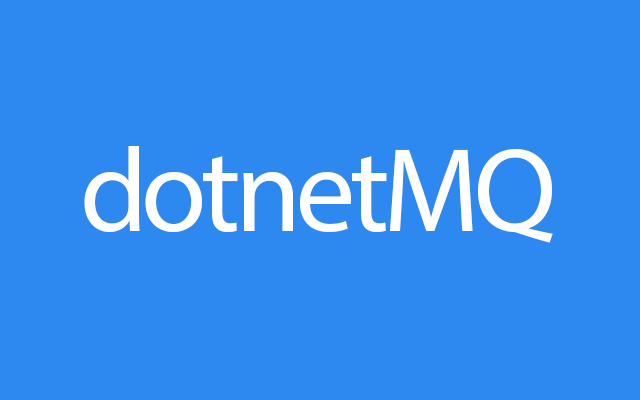
<style>
.page{position:relative;width:640px;height:400px;background:#2d89ef}
.page>*{position:absolute;margin:0}
.t1{font:120px "MyriadPro-Regular";letter-spacing:-0.05em;color:#ffffff}
</style>
<div class="page">
<p class="t1" style="left:84px;top:146px;width:469px;height:97px">dotnetMQ</p>
</div>
